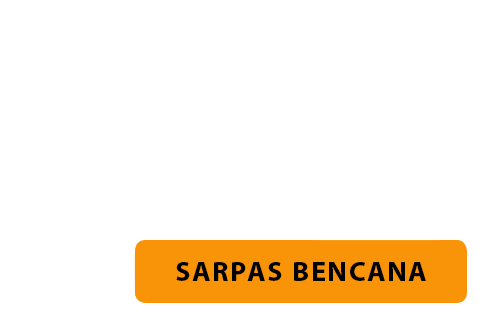
<style>
.page{position:relative;width:487px;height:323px;background:#ffffff}
.page>*{position:absolute;margin:0}
.t1{font:39.6px "MyriadArabic-Bold";letter-spacing:0.04em;color:#000000}
</style>
<div class="page">
<p class="t1" style="left:176px;top:262px;width:250px;height:19px">SARPAS BENCANA</p>
</div>
